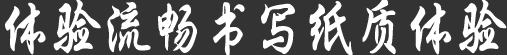
<style>
.page{position:relative;width:507px;height:55px;background:#333333}
.page>*{position:absolute;margin:0}
.t1{font:63.6px "STXingkaiSC-Bold";color:#ffffff;scale:0.8 1}
</style>
<div class="page">
<p class="t1" style="left:5px;top:0px;width:502px;height:57px">体验流畅书写纸质体验</p>
</div>
